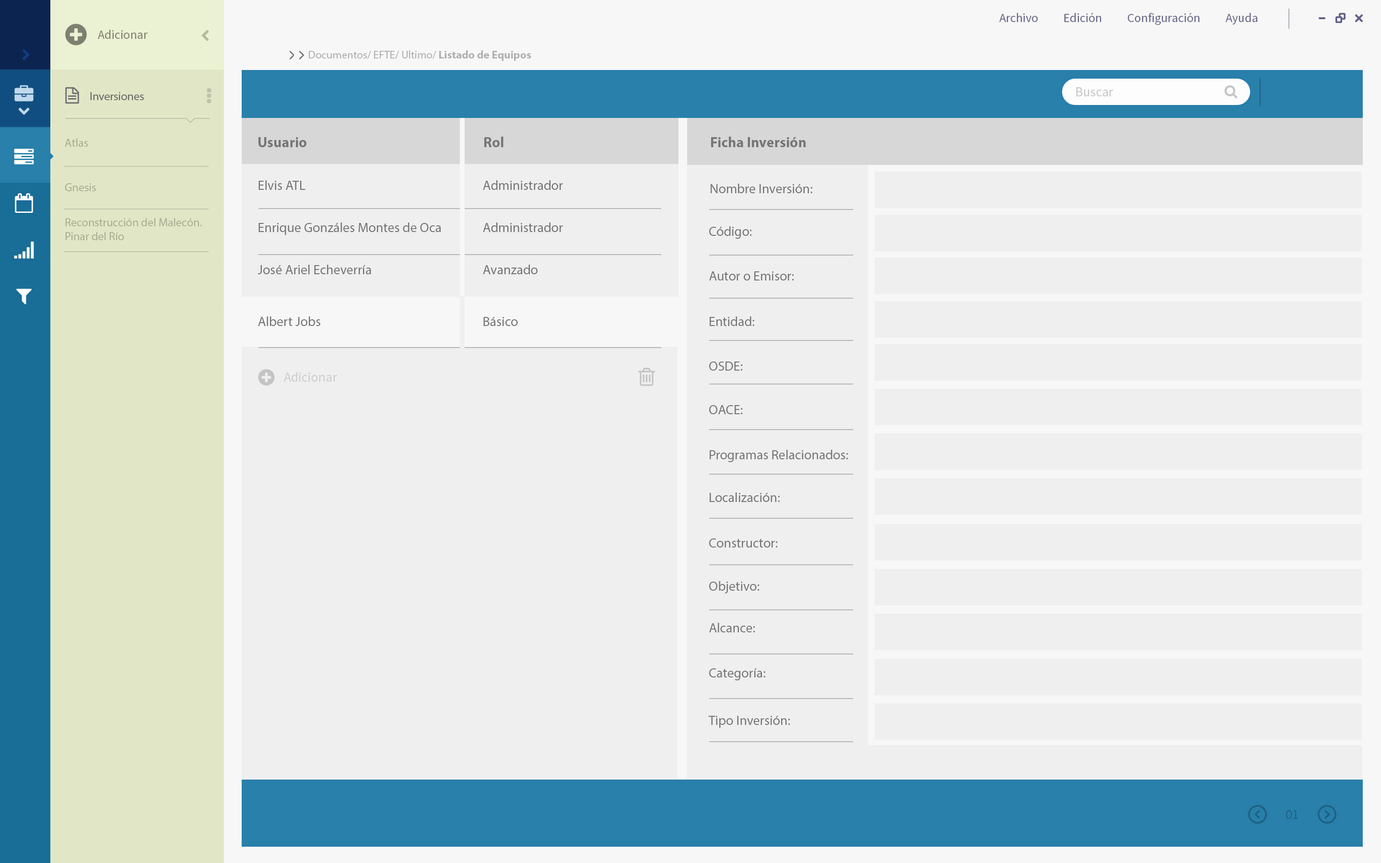
<style>
.page{position:relative;width:1381px;height:863px;background:#efefef}
.page>*{position:absolute;margin:0}
.t1{font:11px "MyriadPro-Regular";color:#afafaf}
.t2{font:11px "MyriadPro-Bold";color:#afafaf}
.t3{font:11.5px "MyriadPro-Regular";color:#6a6b66}
.t4{font:14.4px "MyriadPro-Bold";color:#757575}
.t5{font:11.5px "MyriadPro-Regular";color:#b2a791}
.t6{font:13.4px "MyriadPro-Regular";color:#747474}
.t7{font:13.4px "MyriadPro-Regular";color:#757575}
</style>
<div class="page">
<p class="t1" style="left:309px;top:50px;width:222px;height:11px">Documentos/ EFTE/ Ultimo/<span class="t2"> Listado de Equipos</span></p>
<p class="t3" style="left:90px;top:92px;width:54px;height:8px">Inversiones</p>
<p class="t4" style="left:259px;top:137px;width:47px;height:10px">Usuario</p>
<p class="t4" style="left:484px;top:137px;width:20px;height:10px">Rol</p>
<p class="t4" style="left:711px;top:137px;width:95px;height:10px">Ficha Inversión</p>
<p class="t5" style="left:65px;top:139px;width:23px;height:8px">Atlas</p>
<p class="t5" style="left:65px;top:183px;width:31px;height:8px">Gnesis</p>
<p class="t6" style="left:259px;top:180px;width:47px;height:10px">Elvis ATL</p>
<p class="t6" style="left:483px;top:180px;width:80px;height:10px">Administrador</p>
<p class="t7" style="left:711px;top:184px;width:101px;height:9px">Nombre Inversión:</p>
<p class="t5" style="left:65px;top:218px;width:137px;height:22px">Reconstrucción del Malecón. Pinar del Río</p>
<p class="t6" style="left:259px;top:223px;width:182px;height:12px">Enrique Gonzáles Montes de Oca</p>
<p class="t6" style="left:483px;top:223px;width:80px;height:9px">Administrador</p>
<p class="t7" style="left:709px;top:226px;width:43px;height:13px">Código:</p>
<p class="t6" style="left:258px;top:265px;width:113px;height:9px">José Ariel Echeverría</p>
<p class="t6" style="left:483px;top:265px;width:55px;height:9px">Avanzado</p>
<p class="t7" style="left:709px;top:271px;width:85px;height:10px">Autor o Emisor:</p>
<p class="t6" style="left:258px;top:317px;width:62px;height:9px">Albert Jobs</p>
<p class="t6" style="left:483px;top:317px;width:35px;height:9px">Básico</p>
<p class="t7" style="left:710px;top:317px;width:44px;height:9px">Entidad:</p>
<p class="t7" style="left:709px;top:362px;width:34px;height:9px">OSDE:</p>
<p class="t7" style="left:709px;top:405px;width:34px;height:9px">OACE:</p>
<p class="t7" style="left:710px;top:450px;width:138px;height:12px">Programas Relacionados:</p>
<p class="t7" style="left:710px;top:493px;width:70px;height:9px">Localización:</p>
<p class="t7" style="left:709px;top:539px;width:69px;height:9px">Constructor:</p>
<p class="t7" style="left:709px;top:581px;width:51px;height:13px">Objetivo:</p>
<p class="t7" style="left:709px;top:623px;width:46px;height:10px">Alcance:</p>
<p class="t7" style="left:709px;top:669px;width:56px;height:12px">Categoría:</p>
<p class="t7" style="left:708px;top:716px;width:82px;height:12px">Tipo Inversión:</p>
</div>
